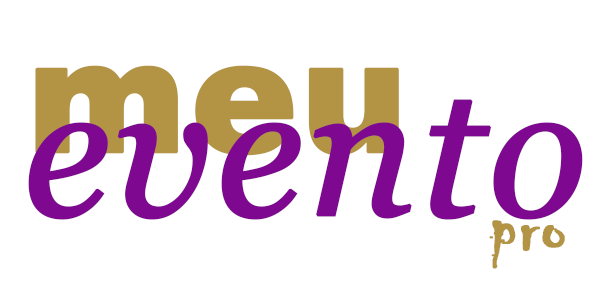
<style>
.page{position:relative;width:600px;height:300px;background:#ffffff}
.page>*{position:absolute;margin:0}
.t1{font:160.1px "Arial-Black";color:#b39444;font-weight:bold}
.t2{font:183px "Georgia-Italic";color:#7e088f;font-weight:bold}
.t3{font:80.1px "Chiller-Regular";color:#b39444;font-weight:bold}
</style>
<div class="page">
<p class="t1" style="left:35px;top:65px;width:364px;height:91px">meu</p>
<p class="t2" style="left:28px;top:99px;width:555px;height:121px">evento</p>
<p class="t3" style="left:489px;top:220px;width:76px;height:49px;rotate:-1deg">pro</p>
</div>
